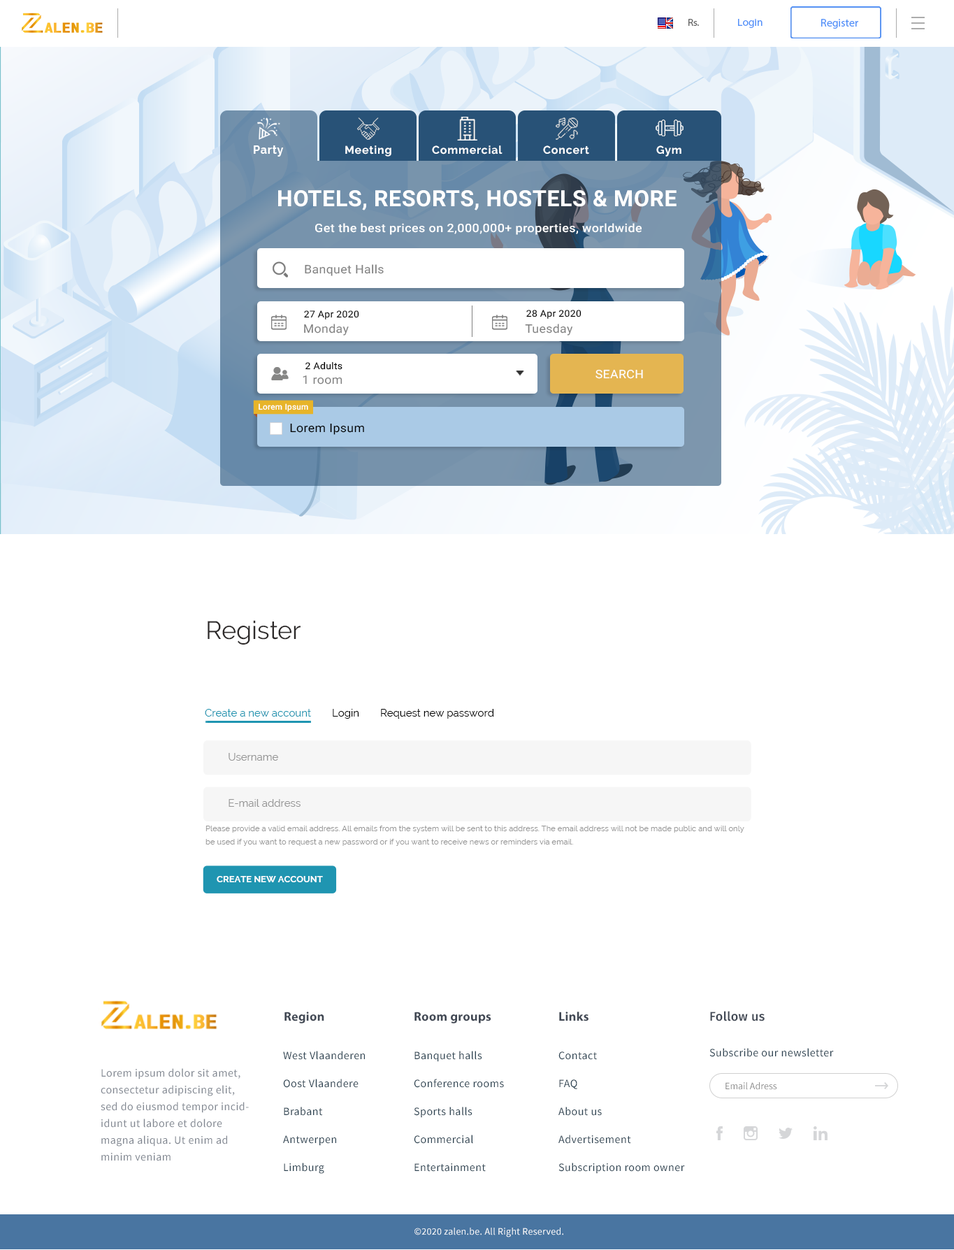
<style>
.page{position:relative;width:954px;height:1250px;background:#ffffff}
.page>*{position:absolute;margin:0}
.t1{font:9.9px "MyriadPro-Regular";color:#636363;scale:1.04 1}
.t2{font:10.2px "MyriadPro-Regular";color:#5392f9;scale:1.07 1}
.t3{font:11.2px "MyriadPro-Regular";color:#5392f9}
.t4{font:8.4px "Raleway-Bold";letter-spacing:0.05em;color:#ffffff}
.t5{font:22.4px "Roboto-Bold";letter-spacing:0.02em;color:#ffffff}
.t6{font:11.8px "Roboto-Medium";letter-spacing:0.02em;color:#ffffff;scale:1.07 1}
.t7{font:11.8px "Roboto-Regular";letter-spacing:0.02em;color:#818181;scale:1.06 1}
.t8{font:9.3px "Roboto-Regular";letter-spacing:0.02em;color:#000000;scale:1.06 1}
.t9{font:11.8px "Roboto-Regular";letter-spacing:0.02em;color:#ffffff;scale:1.06 1}
.t10{font:8.2px "Roboto-Medium";letter-spacing:0.02em;color:#ffffff}
.t11{font:11.8px "Roboto-Regular";letter-spacing:0.02em;color:#000000;scale:1.06 1}
.t12{font:25.2px "Raleway-Regular";color:#2d2a2a}
.t13{font:10.5px "Raleway-Regular";color:#1f95b1}
.t14{font:10.5px "Raleway-Regular";color:#000000}
.t15{font:10.5px "Raleway-Regular";color:#959595}
.t16{font:7.9px/13.4px "Raleway-Regular";color:#959595}
.t17{font:9.1px "Raleway-Bold";color:#ffffff}
.t18{font:12.6px "MyriadPro-Bold";letter-spacing:0.02em;color:#424955}
.t19{font:12.6px "FiraSans-Medium";letter-spacing:0.02em;color:#424955}
.t20{font:11.2px "SourceSansPro-Regular";letter-spacing:0.03em;color:#2e4453}
.t21{font:11.2px/28px "SourceSansPro-Regular";letter-spacing:0.03em;color:#2e4453}
.t22{font:11.2px/16.8px "SourceSansPro-Regular";letter-spacing:0.03em;color:#818791}
.t23{font:9.8px "SourceSansPro-Regular";color:#8c8c8c}
.t24{font:9.8px "SourceSansPro-Regular";letter-spacing:0.02em;color:#ffffff}
</style>
<div class="page">
<p class="t1" style="left:688px;top:19px;width:11px;height:7px">Rs.</p>
<p class="t2" style="left:738px;top:19px;width:25px;height:9px">Login</p>
<p class="t3" style="left:821px;top:19px;width:37px;height:10px">Register</p>
<p class="t4" style="left:254px;top:145px;width:30px;height:12px">Party</p>
<p class="t4" style="left:345px;top:145px;width:46px;height:12px">Meeting</p>
<p class="t4" style="left:432px;top:145px;width:71px;height:9px">Commercial</p>
<p class="t4" style="left:543px;top:145px;width:46px;height:9px">Concert</p>
<p class="t4" style="left:656px;top:145px;width:26px;height:12px">Gym</p>
<p class="t5" style="left:278px;top:190px;width:399px;height:20px">HOTELS, RESORTS, HOSTELS &amp; MORE</p>
<p class="t6" style="left:315px;top:223px;width:327px;height:12px">Get the best prices on 2,000,000+ properties, worldwide</p>
<p class="t7" style="left:305px;top:264px;width:79px;height:12px">Banquet Halls</p>
<p class="t8" style="left:304px;top:310px;width:55px;height:9px">27 Apr 2020</p>
<p class="t8" style="left:526px;top:310px;width:56px;height:9px">28 Apr 2020</p>
<p class="t7" style="left:304px;top:324px;width:45px;height:12px">Monday</p>
<p class="t7" style="left:525px;top:324px;width:47px;height:12px">Tuesday</p>
<p class="t8" style="left:305px;top:361px;width:38px;height:9px">2 Adults</p>
<p class="t7" style="left:303px;top:375px;width:40px;height:9px">1 room</p>
<p class="t9" style="left:596px;top:369px;width:47px;height:10px">SEARCH</p>
<p class="t10" style="left:259px;top:403px;width:49px;height:9px">Lorem Ipsum</p>
<p class="t11" style="left:290px;top:423px;width:74px;height:12px">Lorem Ipsum</p>
<p class="t12" style="left:208px;top:620px;width:93px;height:24px">Register</p>
<p class="t13" style="left:205px;top:709px;width:106px;height:7px">Create a new account</p>
<p class="t14" style="left:333px;top:709px;width:26px;height:10px">Login</p>
<p class="t14" style="left:381px;top:709px;width:113px;height:10px">Request new password</p>
<p class="t15" style="left:229px;top:753px;width:49px;height:7px">Username</p>
<p class="t15" style="left:229px;top:799px;width:72px;height:8px">E-mail address</p>
<p class="t16" style="left:206px;top:825px;width:538px;height:21px">Please provide a valid email address. All emails from the system will be sent to this address. The email address will not be made public and will only be used if you want to request a new password or if you want to receive news or reminders via email.</p>
<p class="t17" style="left:217px;top:876px;width:106px;height:6px">CREATE NEW ACCOUNT</p>
<p class="t18" style="left:284px;top:1011px;width:40px;height:12px">Region</p>
<p class="t18" style="left:414px;top:1011px;width:77px;height:12px">Room groups</p>
<p class="t18" style="left:559px;top:1011px;width:30px;height:10px">Links</p>
<p class="t19" style="left:710px;top:1011px;width:55px;height:10px">Follow us</p>
<p class="t20" style="left:709px;top:1048px;width:125px;height:9px">Subscribe our newsletter</p>
<p class="t21" style="left:283px;top:1051px;width:82px;height:123px">West Vlaanderen<br>Oost Vlaandere<br>Brabant<br>Antwerpen<br>Limburg</p>
<p class="t21" style="left:414px;top:1051px;width:90px;height:120px">Banquet halls<br>Conference rooms<br>Sports halls<br>Commercial<br>Entertainment</p>
<p class="t21" style="left:558px;top:1051px;width:127px;height:123px">Contact<br>FAQ<br>About us<br>Advertisement<br>Subscription room owner</p>
<p class="t22" style="left:101px;top:1068px;width:148px;height:93px">Lorem ipsum dolor sit amet, consectetur adipiscing elit, sed do eiusmod tempor incididunt ut labore et dolore magna aliqua. Ut enim ad minim veniam</p>
<p class="t23" style="left:726px;top:1082px;width:51px;height:8px">Email Adress</p>
<p class="t24" style="left:414px;top:1227px;width:149px;height:10px">©2020 zalen.be. All Right Reserved.</p>
</div>
